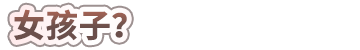
<style>
.page{position:relative;width:360px;height:50px;background:#ffffff}
.page>*{position:absolute;margin:0}
.t1{font:32px "SourceHanSansSC-Bold";font-weight:bold}
</style>
<div class="page">
<p class="t1" style="left:14px;top:9px;width:113px;height:32px">女孩子？</p>
</div>
